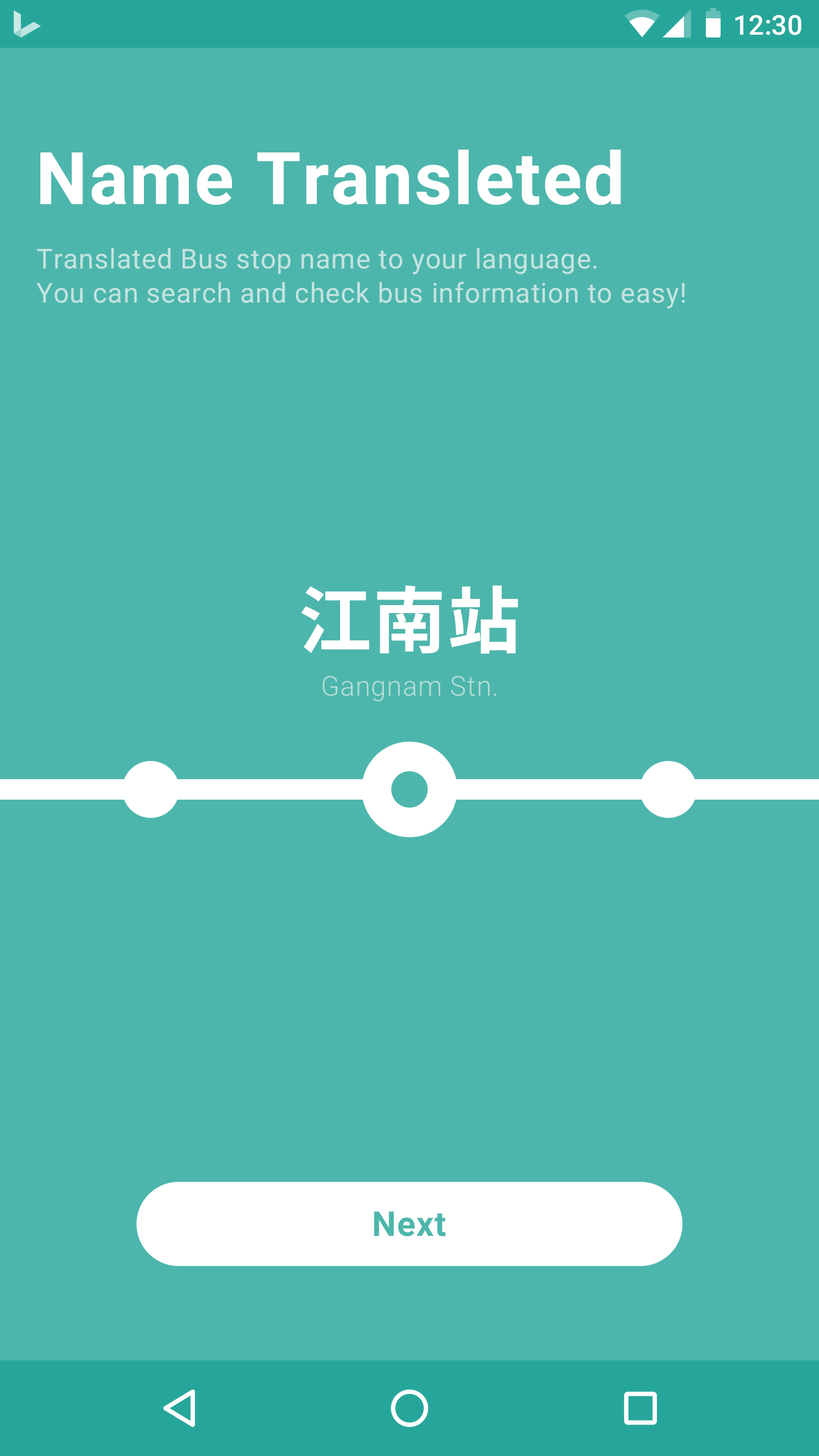
<style>
.page{position:relative;width:819px;height:1456px;background:#4db6ac}
.page>*{position:absolute;margin:0}
.t1{font:27.3px "Roboto-Medium";color:#ffffff}
.t2{font:72.8px "Roboto-Bold";letter-spacing:0.025em;color:#ffffff}
.t3{font:27.3px/34.1px "Roboto-Regular";letter-spacing:0.025em;color:#c5e4e0}
.t4{font:72.8px "NotoSansCJKkr-Bold";letter-spacing:0.025em;color:#ffffff}
.t5{font:27.3px "Roboto-Light";letter-spacing:0.025em;color:#b5ddd8}
.t6{font:34.1px "Roboto-Bold";letter-spacing:0.025em;color:#4db6ac}
</style>
<div class="page">
<p class="t1" style="left:735px;top:15px;width:66px;height:20px">12:30</p>
<p class="t2" style="left:40px;top:150px;width:581px;height:55px">Name Transleted</p>
<p class="t3" style="left:36px;top:248px;width:649px;height:61px">Translated Bus stop name to your language.<br>You can search and check bus information to easy!</p>
<p class="t4" style="left:301px;top:585px;width:217px;height:69px">江南站</p>
<p class="t5" style="left:322px;top:676px;width:175px;height:25px">Gangnam Stn.</p>
<p class="t6" style="left:374px;top:1211px;width:72px;height:25px">Next</p>
</div>
